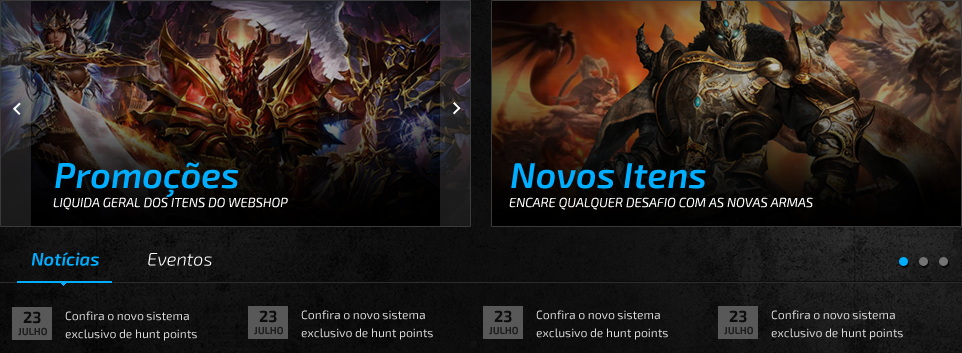
<style>
.page{position:relative;width:962px;height:353px}
.page>*{position:absolute;margin:0}
.t1{font:20px "Anklada";color:#ffffff}
.t2{font:36px "Exo2-SemiBoldItalic";color:#00aeff}
.t3{font:13px "Exo2-LightItalic";color:#ffffff}
.t4{font:18.1px "Exo2-SemiBoldItalic";color:#00aeff}
.t5{font:18.1px "Exo2-LightItalic";color:#ffffff}
.t6{font:16px "Exo2-Bold";color:#0d0d0d}
.t7{font:12px/18px "Exo2-Regular";color:#dbdbdb}
.t8{font:10px "Exo2-Bold";color:#1e1e1e}
</style>
<div class="page">
<p class="t1" style="left:13px;top:102px;width:8px;height:13px;rotate:180deg">&gt;</p>
<p class="t1" style="left:453px;top:102px;width:8px;height:13px">&gt;</p>
<p class="t2" style="left:55px;top:162px;width:184px;height:35px">Promoções</p>
<p class="t2" style="left:511px;top:163px;width:195px;height:26px">Novos Itens</p>
<p class="t3" style="left:53px;top:197px;width:235px;height:13px">LIQUIDA GERAL DOS ITENS DO WEBSHOP</p>
<p class="t3" style="left:509px;top:197px;width:304px;height:13px">ENCARE QUALQUER DESAFIO COM AS NOVAS ARMAS</p>
<p class="t4" style="left:31px;top:252px;width:181px;height:14px">Notícias            <span class="t5">Eventos</span></p>
<p class="t6" style="left:23px;top:311px;width:18px;height:13px">23</p>
<p class="t7" style="left:65px;top:311px;width:132px;height:30px">Confira o novo sistema<br>exclusivo de hunt points</p>
<p class="t8" style="left:18px;top:327px;width:29px;height:9px">JULHO</p>
</div>
